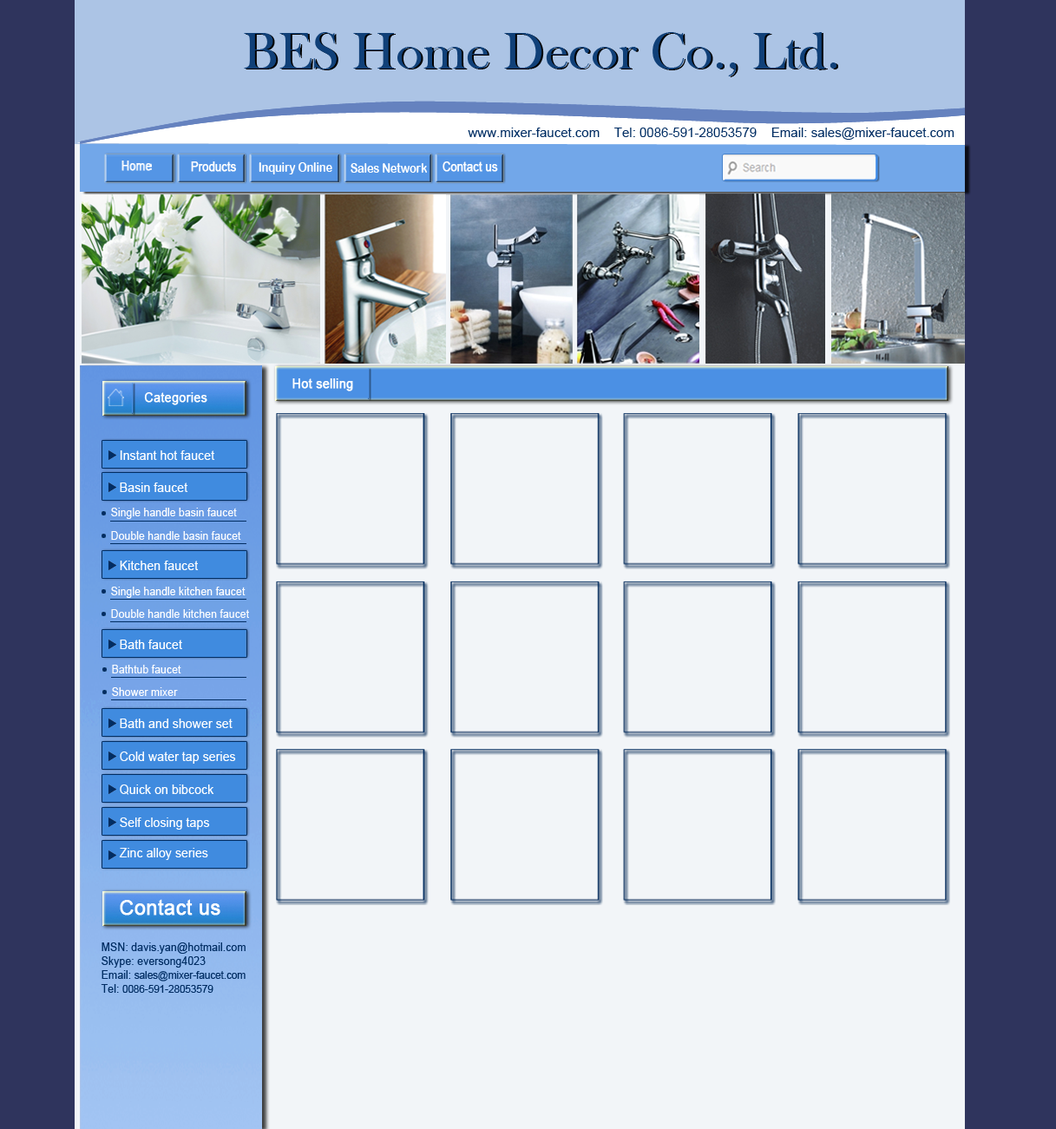
<style>
.page{position:relative;width:1056px;height:1129px;background:#f2f5f8}
.page>*{position:absolute;margin:0}
.t1{font:53.3px "BaskOldFace";color:#104078}
.t2{font:53.3px "ArialMT";color:#4b90e4}
.t3{font:13px "ArialMT";color:#002d63}
.t4{font:13px "ArialMT";color:#ffffff;font-weight:bold;scale:0.84 1}
.t5{font:13px "ArialRoundedMTBold";color:#ffffff;scale:0.84 1}
.t6{font:13px "ArialMT";color:#ffffff;font-weight:bold;scale:0.95 1}
.t7{font:13px "ArialMT";color:#ffffff;scale:0.95 1}
.t8{font:11.3px "ArialMT";color:#ffffff;scale:0.95 1}
.t9{font:21.2px "ArialMT";color:#ffffff;font-weight:bold;scale:0.95 1}
.t10{font:11.4px/13.9px "ArialMT";color:#002d63;scale:0.95 1}
.t11{font:10.6px/13.9px "ArialMT";color:#002d63;scale:0.95 1}
</style>
<div class="page">
<p class="t1" style="left:244px;top:32px;width:593px;height:44px"><span class="t2"> </span>BES Home Decor Co., Ltd.</p>
<p class="t3" style="left:468px;top:128px;width:487px;height:12px">www.mixer-faucet.com    Tel: 0086-591-28053579    Email: sales@mixer-faucet.com</p>
<p class="t4" style="left:191px;top:161px;width:45px;height:11px">Products</p>
<p class="t4" style="left:443px;top:161px;width:55px;height:11px">Contact us</p>
<p class="t5" style="left:259px;top:162px;width:73px;height:12px">Inquiry Online</p>
<p class="t5" style="left:351px;top:163px;width:76px;height:10px">Sales Network</p>
<p class="t6" style="left:292px;top:378px;width:61px;height:13px">Hot selling</p>
<p class="t6" style="left:144px;top:392px;width:63px;height:13px">Categories</p>
<p class="t7" style="left:120px;top:450px;width:95px;height:10px">Instant hot faucet</p>
<p class="t7" style="left:120px;top:483px;width:68px;height:9px">Basin faucet</p>
<p class="t8" style="left:111px;top:508px;width:126px;height:11px">Single handle basin faucet</p>
<p class="t8" style="left:111px;top:531px;width:130px;height:9px">Double handle basin faucet</p>
<p class="t7" style="left:120px;top:561px;width:79px;height:9px">Kitchen faucet</p>
<p class="t8" style="left:111px;top:587px;width:135px;height:11px">Single handle kitchen faucet</p>
<p class="t8" style="left:111px;top:609px;width:138px;height:9px">Double handle kitchen faucet</p>
<p class="t7" style="left:120px;top:640px;width:62px;height:9px">Bath faucet</p>
<p class="t8" style="left:112px;top:665px;width:69px;height:8px">Bathtub faucet</p>
<p class="t8" style="left:112px;top:687px;width:66px;height:9px">Shower mixer</p>
<p class="t7" style="left:120px;top:719px;width:113px;height:9px">Bath and shower set</p>
<p class="t7" style="left:120px;top:752px;width:116px;height:12px">Cold water tap series</p>
<p class="t7" style="left:120px;top:785px;width:94px;height:10px">Quick on bibcock</p>
<p class="t7" style="left:120px;top:817px;width:90px;height:13px">Self closing taps</p>
<p class="t7" style="left:119px;top:848px;width:89px;height:12px">Zinc alloy series</p>
<p class="t9" style="left:120px;top:899px;width:100px;height:17px">Contact us</p>
<p class="t10" style="left:101px;top:942px;width:145px;height:51px;text-align:justify">MSN: davis.yan@hotmail.com<br>Skype: eversong4023<br>Email: <span class="t11">sales@mixer-faucet.com<br></span>Tel: <span class="t11">0086-591-28053579</span></p>
</div>
